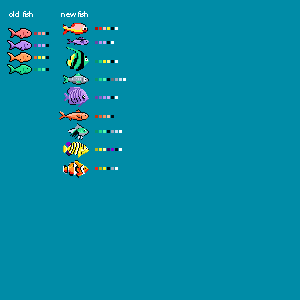
<style>
.page{position:relative;width:300px;height:300px;background:#008ca7}
.page>*{position:absolute;margin:0}
.t1{font:8px "MyriadPro-Regular";color:#ffffff}
</style>
<div class="page">
<p class="t1" style="left:9px;top:11px;width:24px;height:6px">old fish</p>
<p class="t1" style="left:61px;top:11px;width:27px;height:6px">new fish</p>
</div>
